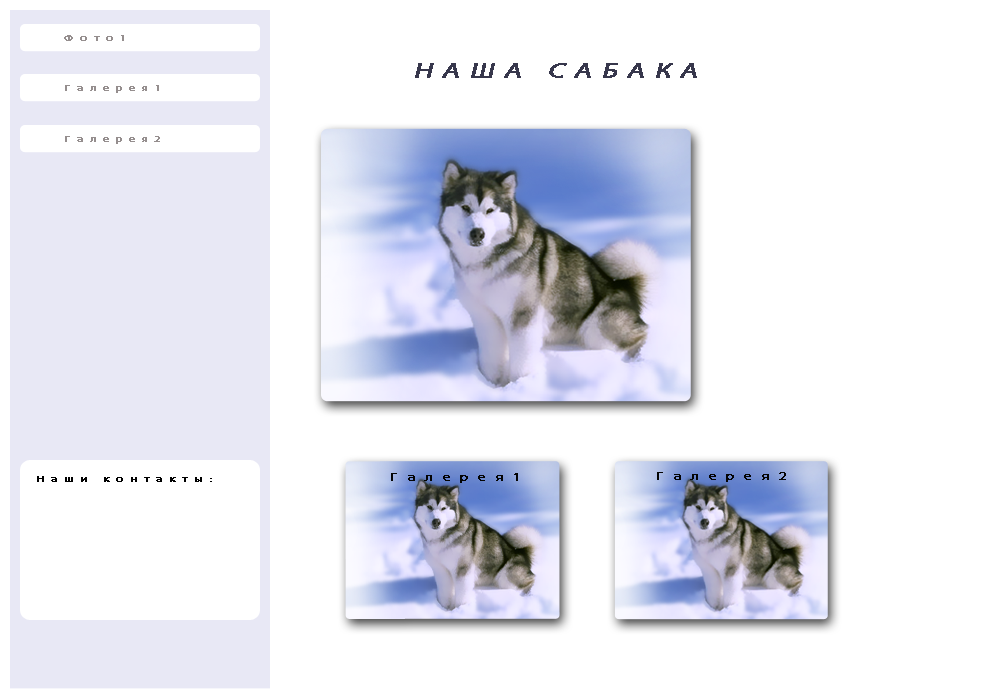
<style>
.page{position:relative;width:1000px;height:700px;background:#ffffff}
.page>*{position:absolute;margin:0}
.t1{font:8.5px "MyriadPro-Regular";letter-spacing:0.53em;color:#958e8e;font-weight:bold;scale:1.38 1}
.t2{font:20.4px "MyriadPro-Regular";letter-spacing:0.33em;color:#37374c;font-weight:bold;font-style:italic;scale:1.38 1}
.t3{font:11.9px "MyriadPro-Regular";letter-spacing:0.53em;color:#040404;font-weight:bold;scale:1.38 1}
.t4{font:8.5px "MyriadPro-Regular";letter-spacing:0.53em;color:#000000;font-weight:bold;scale:1.38 1}
</style>
<div class="page">
<p class="t1" style="left:64px;top:35px;width:60px;height:6px">Фото1</p>
<p class="t2" style="left:415px;top:63px;width:282px;height:15px">НАША САБАКА</p>
<p class="t1" style="left:65px;top:85px;width:94px;height:8px">Галерея1</p>
<p class="t1" style="left:65px;top:136px;width:95px;height:8px">Галерея2</p>
<p class="t3" style="left:391px;top:473px;width:127px;height:10px">Галерея1</p>
<p class="t3" style="left:657px;top:472px;width:129px;height:10px">Галерея2</p>
<p class="t4" style="left:37px;top:476px;width:175px;height:6px">Наши контакты:</p>
</div>
